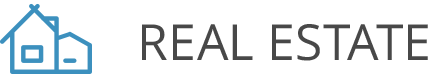
<style>
.page{position:relative;width:440px;height:80px;background:#ffffff}
.page>*{position:absolute;margin:0}
.t1{font:49.6px "OpenSans";color:#484848}
</style>
<div class="page">
<p class="t1" style="left:142px;top:24px;width:286px;height:37px">REAL ESTATE</p>
</div>
